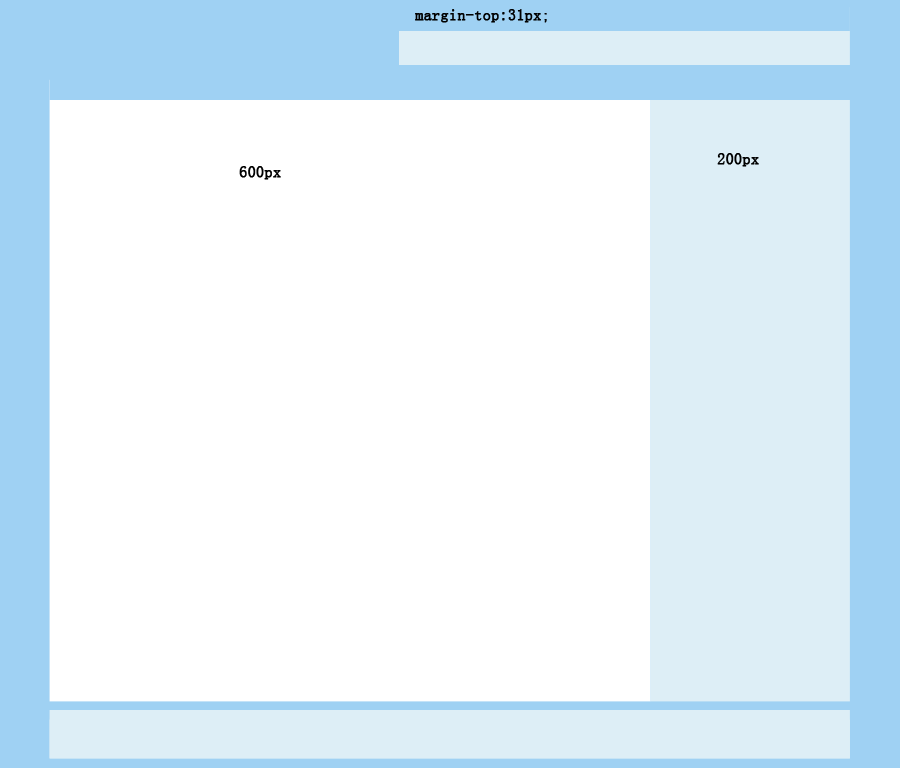
<style>
.page{position:relative;width:900px;height:768px;background:#ffffff}
.page>*{position:absolute;margin:0}
.t1{font:16px "SimSun";color:#000000;font-weight:bold}
</style>
<div class="page">
<p class="t1" style="left:415px;top:9px;width:132px;height:14px">margin-top:31px;</p>
<p class="t1" style="left:717px;top:153px;width:42px;height:14px">200px</p>
<p class="t1" style="left:239px;top:166px;width:42px;height:14px">600px</p>
</div>
